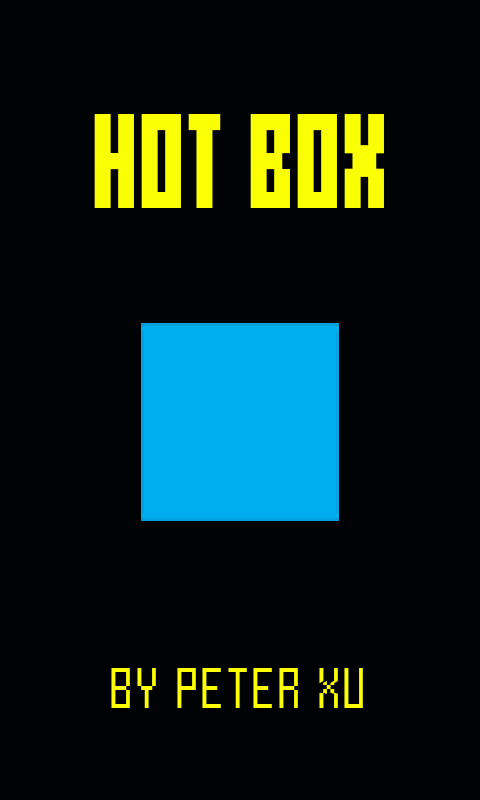
<style>
.page{position:relative;width:480px;height:800px;background:#000204}
.page>*{position:absolute;margin:0}
.t1{font:125px "Mecha-Condensed-Bold";color:#fbff03}
.t2{font:58.3px "Mecha";color:#fbff03}
</style>
<div class="page">
<p class="t1" style="left:94px;top:114px;width:290px;height:94px">HOT BOX</p>
<p class="t2" style="left:111px;top:668px;width:252px;height:40px">BY PETER XU</p>
</div>
